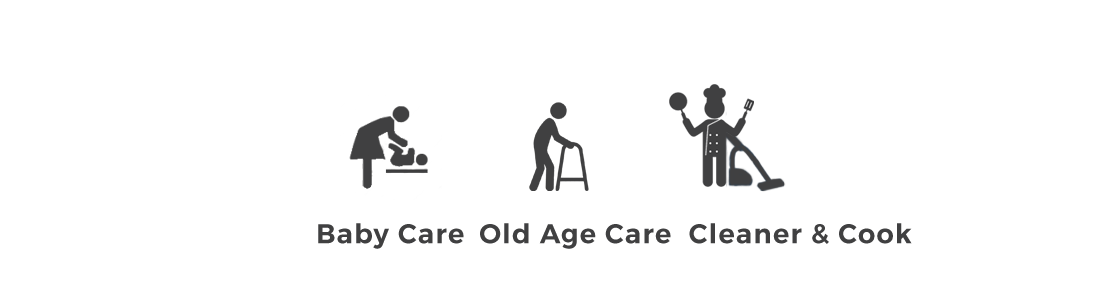
<style>
.page{position:relative;width:1099px;height:284px;background:#ffffff}
.page>*{position:absolute;margin:0}
.t1{font:27px "Montserrat-SemiBold";letter-spacing:0.05em;color:#404041}
</style>
<div class="page">
<p class="t1" style="left:318px;top:223px;width:146px;height:26px">Baby Care</p>
<p class="t1" style="left:480px;top:223px;width:191px;height:26px">Old Age Care</p>
<p class="t1" style="left:689px;top:223px;width:223px;height:21px">Cleaner &amp; Cook</p>
</div>
